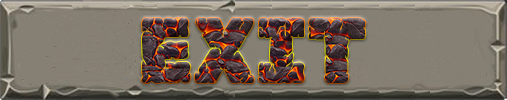
<style>
.page{position:relative;width:507px;height:100px}
.page>*{position:absolute;margin:0}
.t1{font:80px "JFRockSolid"}
</style>
<div class="page">
<p class="t1" style="left:141px;top:18px;width:225px;height:65px">EXIT</p>
</div>
